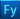
<style>
.page{position:relative;width:20px;height:19px}
.page>*{position:absolute;margin:0}
.t1{font:14.6px "MyriadPro-Bold";letter-spacing:-0.02em;color:#48d0fd;scale:0.92 1}
.t2{font:13px "MyriadPro-Bold";letter-spacing:-0.02em;color:#48d0fd;scale:0.92 1}
</style>
<div class="page">
<p class="t1" style="left:4px;top:4px;width:13px;height:14px">F<span class="t2">y</span></p>
<p class="t1" style="left:4px;top:4px;width:13px;height:14px">Fy</p>
</div>
